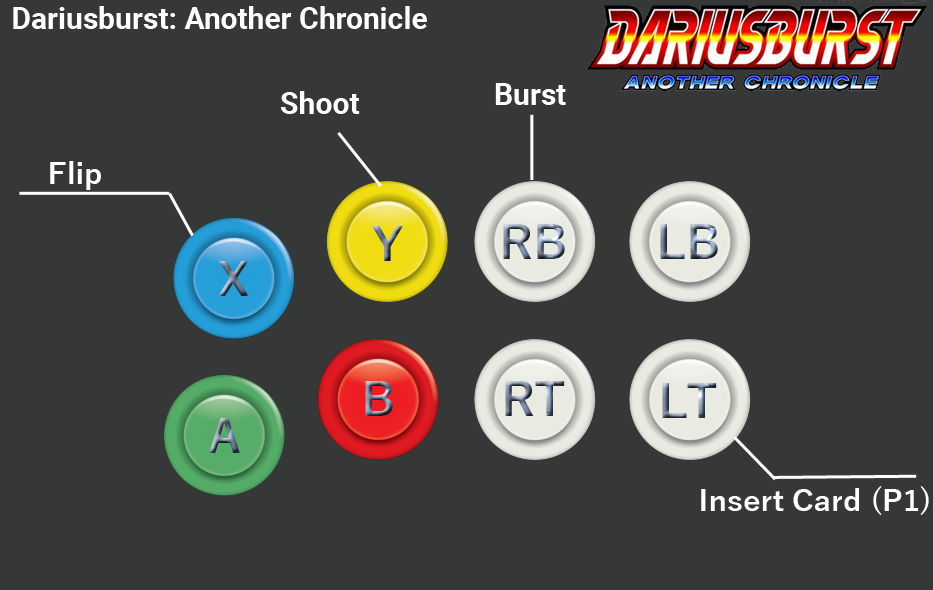
<style>
.page{position:relative;width:933px;height:590px;background:#363838}
.page>*{position:absolute;margin:0}
.t1{font:30px "Roboto-Bold";color:#ffffff}
.t2{font:30px "YuGothic-Bold";color:#ffffff}
</style>
<div class="page">
<p class="t1" style="left:13px;top:6px;width:414px;height:23px">Dariusburst: Another Chronicle</p>
<p class="t1" style="left:495px;top:83px;width:71px;height:22px">Burst</p>
<p class="t1" style="left:281px;top:91px;width:79px;height:23px">Shoot</p>
<p class="t2" style="left:50px;top:161px;width:51px;height:29px">Flip</p>
<p class="t2" style="left:701px;top:486px;width:228px;height:29px">Insert Card (P1)</p>
</div>
